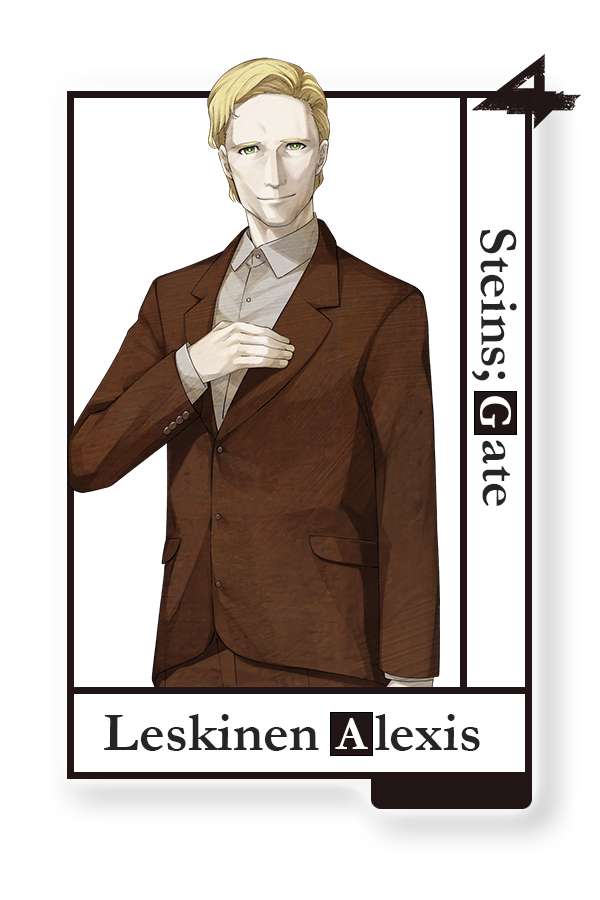
<style>
.page{position:relative;width:600px;height:900px;background:#ffffff}
.page>*{position:absolute;margin:0}
.t1{font:55.4px "Garamond-Bold";color:#252525}
.t2{font:47px "Garamond-Bold";color:#ffffff}
</style>
<div class="page">
<p class="t1" style="left:472px;top:229px;width:45px;height:277px;rotate:89deg">Steins;    ate</p>
<p class="t2" style="left:480px;top:396px;width:31px;height:32px;rotate:90deg">G</p>
<p class="t1" style="left:104px;top:714px;width:376px;height:37px">Leskinen    lexis</p>
<p class="t2" style="left:335px;top:718px;width:33px;height:31px">A</p>
</div>
